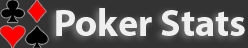
<style>
.page{position:relative;width:248px;height:48px;background:#333333}
.page>*{position:absolute;margin:0}
.t1{font:38.4px "MyriadPro-Bold";color:#efefef}
</style>
<div class="page">
<p class="t1" style="left:56px;top:8px;width:189px;height:28px">Poker Stats</p>
</div>
